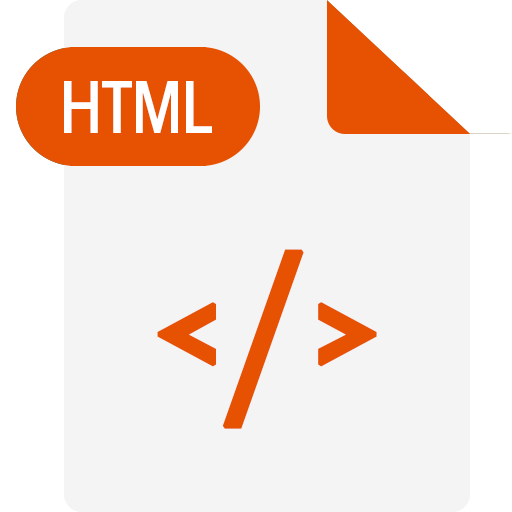
<style>
.page{position:relative;width:512px;height:512px;background:#f4f4f4}
.page>*{position:absolute;margin:0}
.t1{font:72px "FZMHJW--GB1-0";letter-spacing:-0.025em;color:#ffffff}
.t2{font:196.3px "DroidSans";color:#e65201;font-weight:bold}
</style>
<div class="page">
<p class="t1" style="left:64px;top:81px;width:148px;height:52px">HTML</p>
<p class="t2" style="left:157px;top:249px;width:220px;height:180px">&lt;/&gt;</p>
</div>
